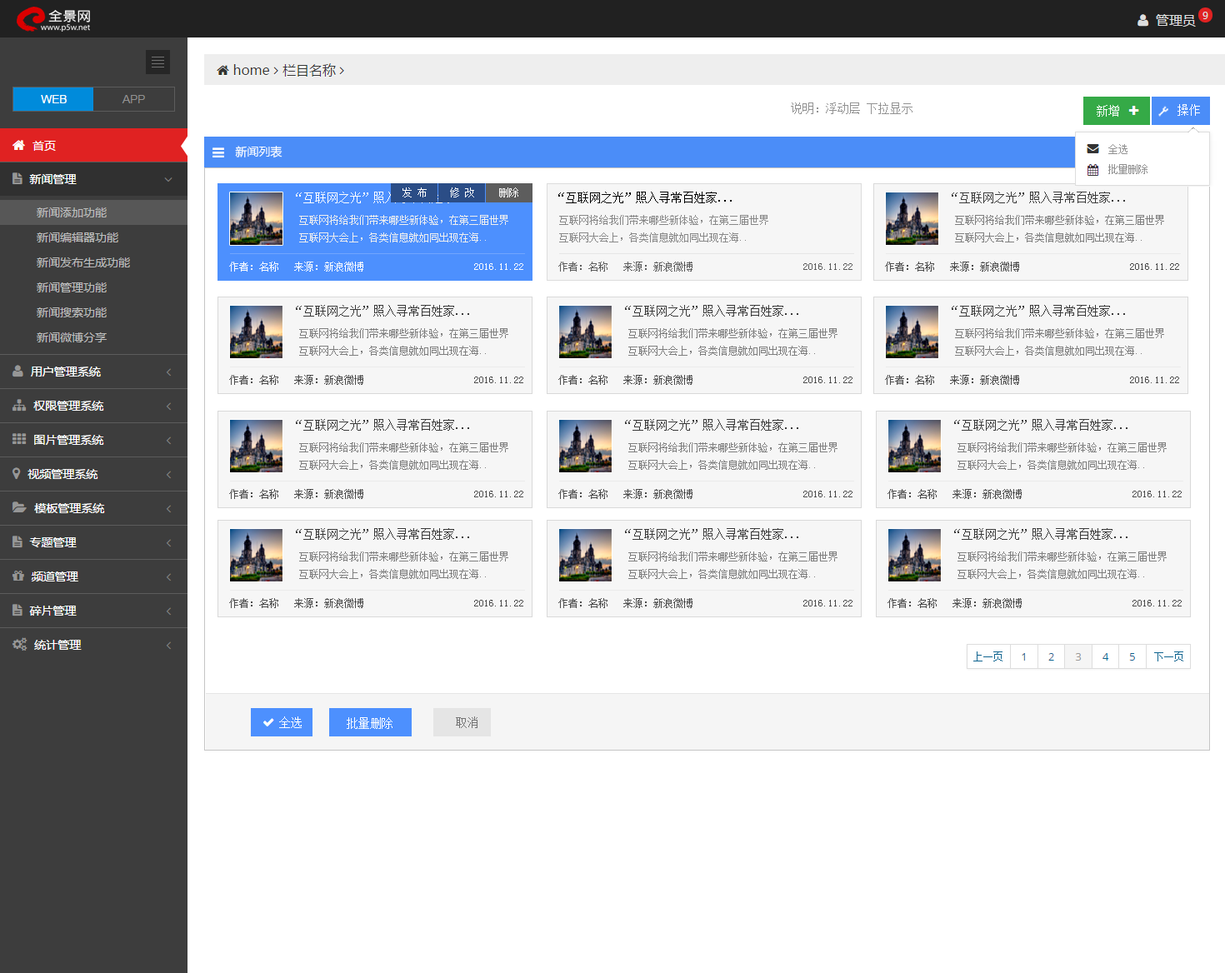
<style>
.page{position:relative;width:1225px;height:973px;background:#ffffff}
.page>*{position:absolute;margin:0}
.t1{font:11.7px "SimSun";color:#929292}
.t2{font:11.7px "SimSun";color:#ffffff}
.t3{font:11.7px "MicrosoftYaHei";color:#ffffff}
.t4{font:10px/20px "SimSun";color:#929292}
.t5{font:11.7px "SimSun"}
.t6{font:10px "SimSun";color:#ffffff}
.t7{font:11.7px "SimSun";color:#000000}
.t8{font:11.7px "SimSun";color:#393939}
.t9{font:10px "SimSun";color:#efefef}
.t10{font:10px "SimSun";color:#888888}
.t11{font:10px "SimSun";color:#7e7e7e}
.t12{font:10px "SimSun";color:#5a5a5a}
.t13{font:10px "SimSun";color:#4b4a4a}
.t14{font:10px "SimSun";color:#0d638f}
.t15{font:11.7px "SimSun";color:#737373}
</style>
<div class="page">
<p class="t1" style="left:791px;top:103px;width:122px;height:11px">说明：浮动层 下拉显示</p>
<p class="t2" style="left:1097px;top:105px;width:22px;height:12px">新增</p>
<p class="t2" style="left:1178px;top:104px;width:22px;height:12px">操作</p>
<p class="t3" style="left:235px;top:146px;width:48px;height:12px">新闻列表</p>
<p class="t4" style="left:1108px;top:144px;width:40px;height:30px">全选<br>批量删除</p>
<p class="t5" style="left:296px;top:192px;width:173px;height:11px">“互联网之光”照入寻常百姓家...</p>
<p class="t5" style="left:296px;top:192px;width:173px;height:11px">“互联网之光”照入寻常百姓家...</p>
<p class="t6" style="left:403px;top:188px;width:24px;height:10px">发 布</p>
<p class="t6" style="left:403px;top:188px;width:24px;height:10px">发 布</p>
<p class="t6" style="left:450px;top:188px;width:24px;height:10px">修 改</p>
<p class="t6" style="left:450px;top:188px;width:24px;height:10px">修 改</p>
<p class="t6" style="left:499px;top:188px;width:19px;height:10px">删除</p>
<p class="t6" style="left:499px;top:188px;width:19px;height:10px">删除</p>
<p class="t7" style="left:558px;top:192px;width:174px;height:11px">“互联网之光”照入寻常百姓家...</p>
<p class="t8" style="left:952px;top:192px;width:173px;height:11px">“互联网之光”照入寻常百姓家...</p>
<p class="t9" style="left:299px;top:215px;width:209px;height:28px">互联网将给我们带来哪些新体验，在第三届世界<br>互联网大会上，各类信息就如同出现在海..</p>
<p class="t9" style="left:299px;top:215px;width:209px;height:28px">互联网将给我们带来哪些新体验，在第三届世界<br>互联网大会上，各类信息就如同出现在海..</p>
<p class="t10" style="left:559px;top:215px;width:209px;height:28px">互联网将给我们带来哪些新体验，在第三届世界<br>互联网大会上，各类信息就如同出现在海..</p>
<p class="t11" style="left:955px;top:215px;width:209px;height:28px">互联网将给我们带来哪些新体验，在第三届世界<br>互联网大会上，各类信息就如同出现在海..</p>
<p class="t6" style="left:229px;top:262px;width:294px;height:10px">作者：名称   来源：新浪微博                      2016.11.22</p>
<p class="t6" style="left:229px;top:262px;width:294px;height:10px">作者：名称   来源：新浪微博                      2016.11.22</p>
<p class="t12" style="left:558px;top:262px;width:295px;height:10px">作者：名称   来源：新浪微博                      2016.11.22</p>
<p class="t13" style="left:885px;top:262px;width:294px;height:10px">作者：名称   来源：新浪微博                      2016.11.22</p>
<p class="t8" style="left:296px;top:305px;width:173px;height:12px">“互联网之光”照入寻常百姓家...</p>
<p class="t8" style="left:625px;top:305px;width:173px;height:12px">“互联网之光”照入寻常百姓家...</p>
<p class="t8" style="left:952px;top:305px;width:173px;height:12px">“互联网之光”照入寻常百姓家...</p>
<p class="t11" style="left:299px;top:328px;width:209px;height:28px">互联网将给我们带来哪些新体验，在第三届世界<br>互联网大会上，各类信息就如同出现在海..</p>
<p class="t11" style="left:628px;top:328px;width:210px;height:28px">互联网将给我们带来哪些新体验，在第三届世界<br>互联网大会上，各类信息就如同出现在海..</p>
<p class="t11" style="left:955px;top:328px;width:209px;height:28px">互联网将给我们带来哪些新体验，在第三届世界<br>互联网大会上，各类信息就如同出现在海..</p>
<p class="t13" style="left:229px;top:375px;width:294px;height:10px">作者：名称   来源：新浪微博                      2016.11.22</p>
<p class="t13" style="left:558px;top:375px;width:295px;height:10px">作者：名称   来源：新浪微博                      2016.11.22</p>
<p class="t13" style="left:885px;top:375px;width:294px;height:10px">作者：名称   来源：新浪微博                      2016.11.22</p>
<p class="t8" style="left:296px;top:419px;width:173px;height:12px">“互联网之光”照入寻常百姓家...</p>
<p class="t8" style="left:625px;top:419px;width:173px;height:12px">“互联网之光”照入寻常百姓家...</p>
<p class="t8" style="left:954px;top:419px;width:174px;height:12px">“互联网之光”照入寻常百姓家...</p>
<p class="t11" style="left:299px;top:443px;width:209px;height:27px">互联网将给我们带来哪些新体验，在第三届世界<br>互联网大会上，各类信息就如同出现在海..</p>
<p class="t11" style="left:628px;top:443px;width:210px;height:27px">互联网将给我们带来哪些新体验，在第三届世界<br>互联网大会上，各类信息就如同出现在海..</p>
<p class="t11" style="left:958px;top:443px;width:209px;height:27px">互联网将给我们带来哪些新体验，在第三届世界<br>互联网大会上，各类信息就如同出现在海..</p>
<p class="t13" style="left:229px;top:489px;width:294px;height:10px">作者：名称   来源：新浪微博                      2016.11.22</p>
<p class="t13" style="left:558px;top:489px;width:295px;height:10px">作者：名称   来源：新浪微博                      2016.11.22</p>
<p class="t13" style="left:888px;top:489px;width:294px;height:10px">作者：名称   来源：新浪微博                      2016.11.22</p>
<p class="t8" style="left:296px;top:528px;width:173px;height:12px">“互联网之光”照入寻常百姓家...</p>
<p class="t8" style="left:625px;top:528px;width:173px;height:12px">“互联网之光”照入寻常百姓家...</p>
<p class="t8" style="left:954px;top:528px;width:174px;height:12px">“互联网之光”照入寻常百姓家...</p>
<p class="t11" style="left:299px;top:552px;width:209px;height:27px">互联网将给我们带来哪些新体验，在第三届世界<br>互联网大会上，各类信息就如同出现在海..</p>
<p class="t11" style="left:628px;top:552px;width:210px;height:27px">互联网将给我们带来哪些新体验，在第三届世界<br>互联网大会上，各类信息就如同出现在海..</p>
<p class="t11" style="left:958px;top:552px;width:209px;height:27px">互联网将给我们带来哪些新体验，在第三届世界<br>互联网大会上，各类信息就如同出现在海..</p>
<p class="t13" style="left:229px;top:598px;width:294px;height:10px">作者：名称   来源：新浪微博                      2016.11.22</p>
<p class="t13" style="left:558px;top:598px;width:295px;height:10px">作者：名称   来源：新浪微博                      2016.11.22</p>
<p class="t13" style="left:888px;top:598px;width:294px;height:10px">作者：名称   来源：新浪微博                      2016.11.22</p>
<p class="t14" style="left:973px;top:652px;width:30px;height:10px">上一页</p>
<p class="t14" style="left:1154px;top:652px;width:29px;height:10px">下一页</p>
<p class="t2" style="left:279px;top:717px;width:23px;height:11px">全选</p>
<p class="t2" style="left:347px;top:718px;width:46px;height:11px">批量删除</p>
<p class="t15" style="left:456px;top:717px;width:22px;height:11px">取消</p>
</div>
